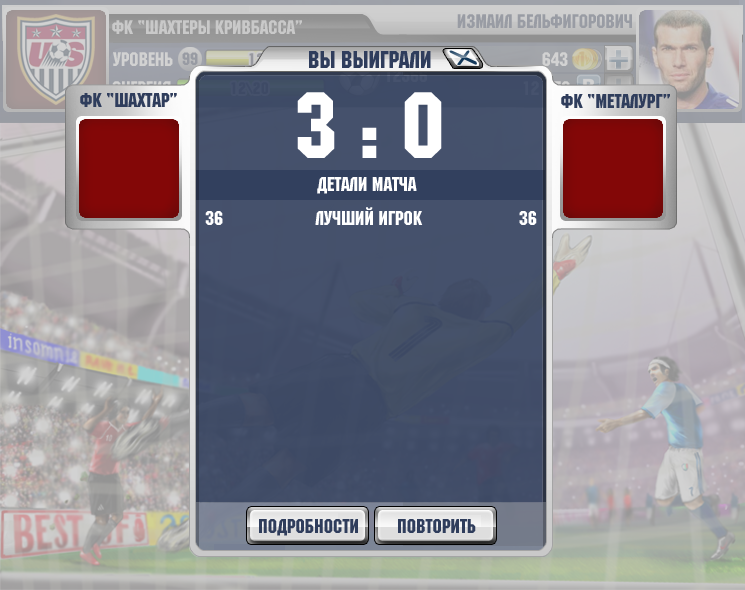
<style>
.page{position:relative;width:745px;height:590px}
.page>*{position:absolute;margin:0}
.t1{font:24.3px "MachineCTT";color:#2f3d5c}
.t2{font:20.1px "MachineCTT";color:#2f3d5c}
.t3{font:93.8px "MachineCTT";letter-spacing:0.24em;color:#ffffff}
.t4{font:19.8px "MachineCTT";color:#ffffff}
</style>
<div class="page">
<p class="t1" style="left:309px;top:51px;width:122px;height:17px">Вы выиграли</p>
<p class="t2" style="left:80px;top:93px;width:97px;height:14px">фк “шахтар”</p>
<p class="t3" style="left:297px;top:92px;width:145px;height:66px">3:0</p>
<p class="t2" style="left:561px;top:94px;width:109px;height:14px">фк “Металург”</p>
<p class="t4" style="left:317px;top:177px;width:100px;height:17px">детали матча</p>
<p class="t4" style="left:205px;top:207px;width:332px;height:18px">36                    Лучший игрок                     36</p>
</div>
